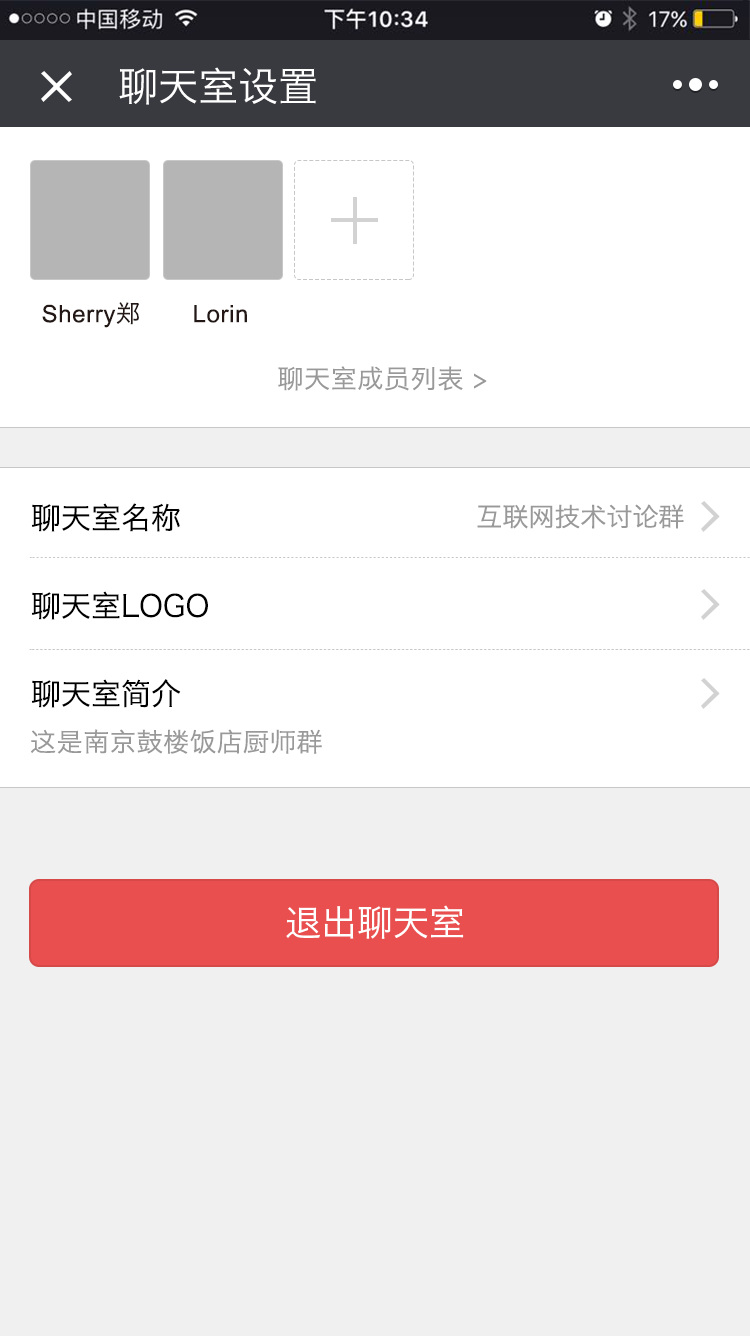
<style>
.page{position:relative;width:750px;height:1336px;background:#ffffff}
.page>*{position:absolute;margin:0}
.t1{font:40px "HiraginoSansGB-W3";color:#ffffff}
.t2{font:24px "ArialMT";letter-spacing:0.025em;color:#231815}
.t3{font:24px "HiraginoSansGB-W3";letter-spacing:0.025em;color:#231815}
.t4{font:26px "HiraginoSansGB-W3";letter-spacing:0.025em;color:#999999}
.t5{font:30px/88px "HiraginoSansGB-W3";color:#000000}
.t6{font:26px "HiraginoSansGB-W3";color:#999999}
.t7{font:36px "HiraginoSansGB-W3";color:#ffffff}
</style>
<div class="page">
<p class="t1" style="left:119px;top:67px;width:197px;height:38px">聊天室设置</p>
<p class="t2" style="left:42px;top:302px;width:97px;height:26px">Sherry<span class="t3">郑</span></p>
<p class="t2" style="left:194px;top:305px;width:53px;height:18px">Lorin</p>
<p class="t4" style="left:278px;top:366px;width:209px;height:25px">聊天室成员列表 &gt;</p>
<p class="t5" style="left:31px;top:503px;width:177px;height:205px">聊天室名称<br>聊天室LOGO<br>聊天室简介</p>
<p class="t6" style="left:477px;top:504px;width:207px;height:25px">互联网技术讨论群</p>
<p class="t4" style="left:31px;top:729px;width:291px;height:25px">这是南京鼓楼饭店厨师群</p>
<p class="t7" style="left:286px;top:905px;width:178px;height:34px">退出聊天室</p>
</div>
